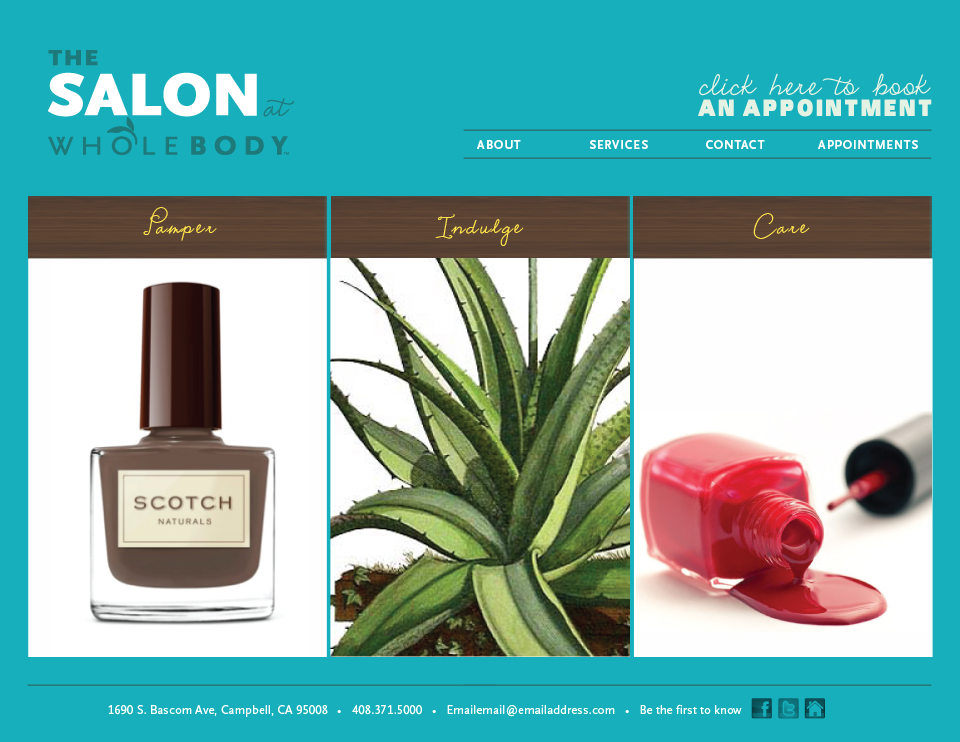
<style>
.page{position:relative;width:960px;height:742px;background:#16afbb}
.page>*{position:absolute;margin:0}
.t1{font:40.5px "EmilyLimePro";color:#e4f2e4}
.t2{font:23.1px "SansBlack";letter-spacing:0.1em;color:#e4f2e4}
.t3{font:12.5px "WFM-ScalaSans-Bold";letter-spacing:0.075em;color:#fefefe}
.t4{font:27px "EmilyLimePro";letter-spacing:0.1em;color:#ffe44c}
.t5{font:12.5px "WFM-ScalaSans-Regular";letter-spacing:0.01em;color:#ffffff}
</style>
<div class="page">
<p class="t1" style="left:699px;top:73px;width:232px;height:23px">click here to book</p>
<p class="t2" style="left:698px;top:99px;width:234px;height:18px">AN APPOINTMENT</p>
<p class="t3" style="left:477px;top:140px;width:44px;height:9px">ABOUT</p>
<p class="t3" style="left:589px;top:140px;width:59px;height:9px">SERVICES</p>
<p class="t3" style="left:706px;top:140px;width:59px;height:9px">CONTACT</p>
<p class="t3" style="left:818px;top:140px;width:100px;height:9px">APPOINTMENTS</p>
<p class="t4" style="left:143px;top:207px;width:74px;height:34px">Pamper</p>
<p class="t4" style="left:435px;top:214px;width:89px;height:32px">Indulge</p>
<p class="t4" style="left:753px;top:213px;width:57px;height:26px">Care</p>
<p class="t5" style="left:108px;top:704px;width:634px;height:13px">1690 S. Bascom Ave, Campbell, CA 95008   •   408.371.5000   •   Emailemail@emailaddress.com   •   Be the first to know</p>
</div>
